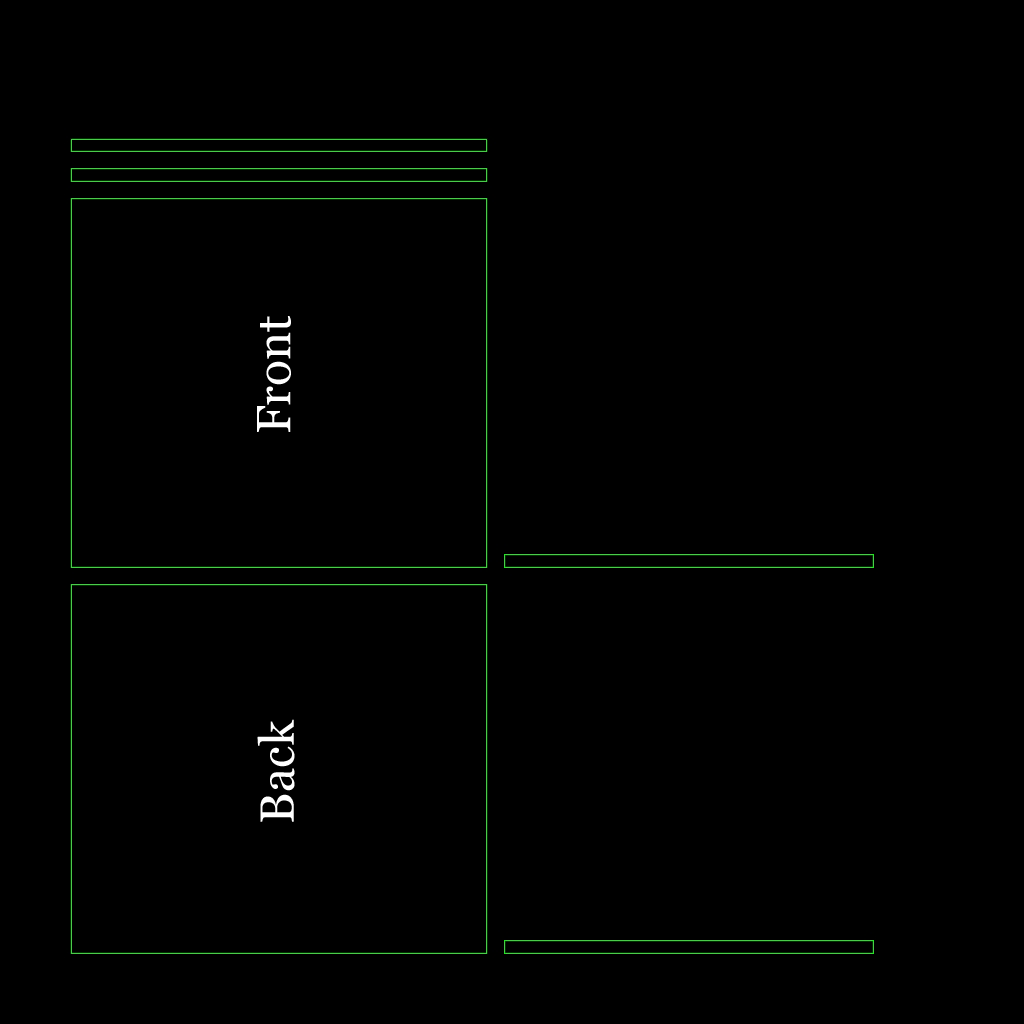
<style>
.page{position:relative;width:1024px;height:1024px;background:#000000}
.page>*{position:absolute;margin:0}
.t1{font:48px "Georgia";color:#ffffff}
</style>
<div class="page">
<p class="t1" style="left:257px;top:316px;width:34px;height:116px;rotate:-90deg">Front</p>
<p class="t1" style="left:257px;top:719px;width:38px;height:103px;rotate:-90deg">Back</p>
</div>
